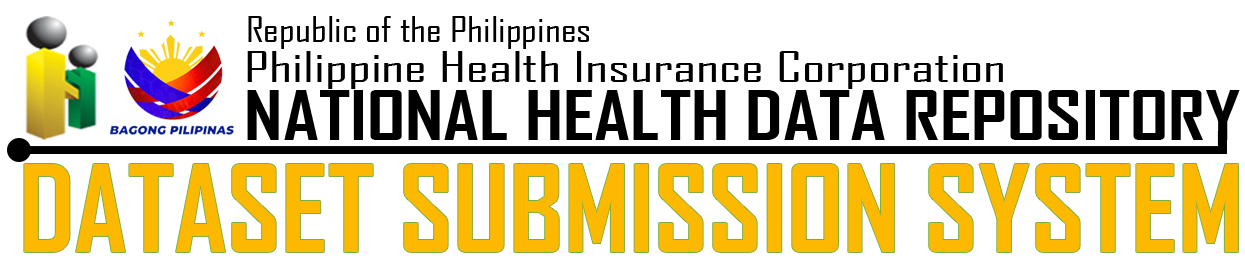
<style>
.page{position:relative;width:1245px;height:258px;background:#ffffff}
.page>*{position:absolute;margin:0}
.t1{font:34px "AgencyFB-Reg";color:#000000;scale:1.23 1}
.t2{font:40.8px "AgencyFB-Reg";color:#000000;scale:1.49 1}
.t3{font:65.6px "AgencyFB-Bold";color:#000000;scale:1.22 1}
.t4{font:114.5px "AgencyFB-Bold";color:#fcb900;scale:1.03 1}
</style>
<div class="page">
<p class="t1" style="left:248px;top:16px;width:341px;height:33px">Republic of the Philippines</p>
<p class="t2" style="left:247px;top:51px;width:756px;height:38px">Philippine Health Insurance Corporation</p>
<p class="t3" style="left:247px;top:90px;width:993px;height:50px">NATIONAL HEALTH DATA REPOSITORY</p>
<p class="t4" style="left:24px;top:164px;width:1214px;height:88px">DATASET SUBMISSION SYSTEM</p>
</div>
